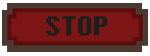
<style>
.page{position:relative;width:150px;height:56px;background:#7e1616}
.page>*{position:absolute;margin:0}
.t1{font:26.6px "Fixedsys";letter-spacing:-0.02em;color:#1b211a;font-weight:bold}
</style>
<div class="page">
<p class="t1" style="left:46px;top:16px;width:62px;height:20px">STOP</p>
</div>
